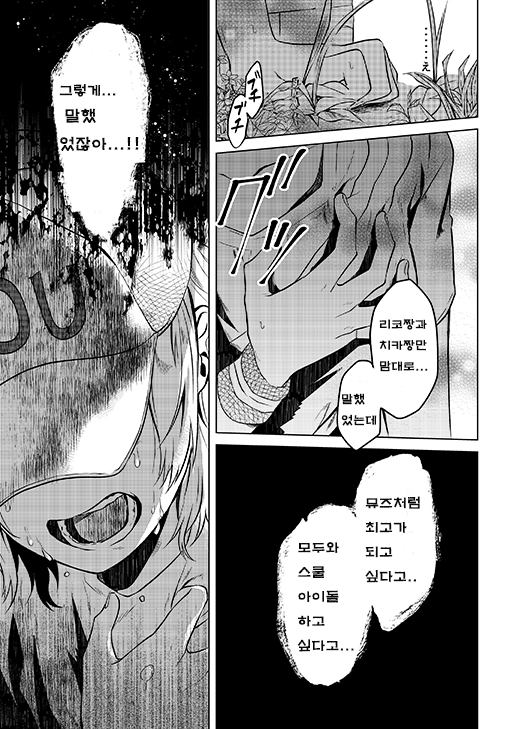
<style>
.page{position:relative;width:516px;height:729px;background:#ffffff}
.page>*{position:absolute;margin:0}
.t1{font:16px "H2mkpB";color:#080808}
.t2{font:14px "H2mkpB";color:#080808}
.t3{font:12px "H2mkpB";color:#080808}
</style>
<div class="page">
<p class="t1" style="left:59px;top:84px;width:80px;height:68px"><span class="t2">그렇게...<br></span> 말했<br>었잖아...!!</p>
<p class="t3" style="left:379px;top:318px;width:49px;height:54px">리코짱과<br>치카짱만<br>맘대로...</p>
<p class="t3" style="left:341px;top:393px;width:36px;height:33px">말했<br>었는데</p>
<p class="t2" style="left:365px;top:496px;width:55px;height:87px">뮤즈처럼<br>최고가<br>되고<br>싶다고..</p>
<p class="t2" style="left:297px;top:542px;width:57px;height:110px">모두와<br>스쿨<br>아이돌<br>하고<br>싶다고...</p>
</div>
